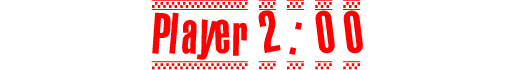
<style>
.page{position:relative;width:512px;height:70px;background:#ffffff}
.page>*{position:absolute;margin:0}
.t1{font:75px "1980Portable";color:#ff0000}
</style>
<div class="page">
<p class="t1" style="left:151px;top:0px;width:212px;height:72px">Player 2 : 0 0</p>
</div>
